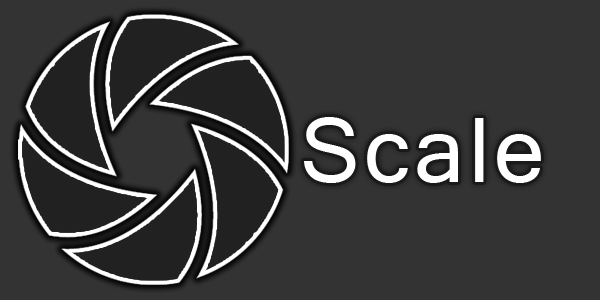
<style>
.page{position:relative;width:600px;height:300px;background:#333333}
.page>*{position:absolute;margin:0}
.t1{font:90px "MicrosoftSansSerif";letter-spacing:0.05em;color:#ffffff}
</style>
<div class="page">
<p class="t1" style="left:304px;top:117px;width:237px;height:66px">Scale</p>
</div>
